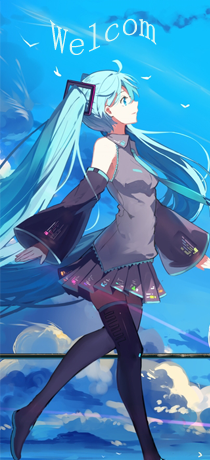
<style>
.page{position:relative;width:210px;height:460px}
.page>*{position:absolute;margin:0}
.t1{font:35.5px "SimSun";color:#d9f6f3}
</style>
<div class="page">
<p class="t1" style="left:50px;top:18px;width:107px;height:37px">Welcom</p>
</div>
